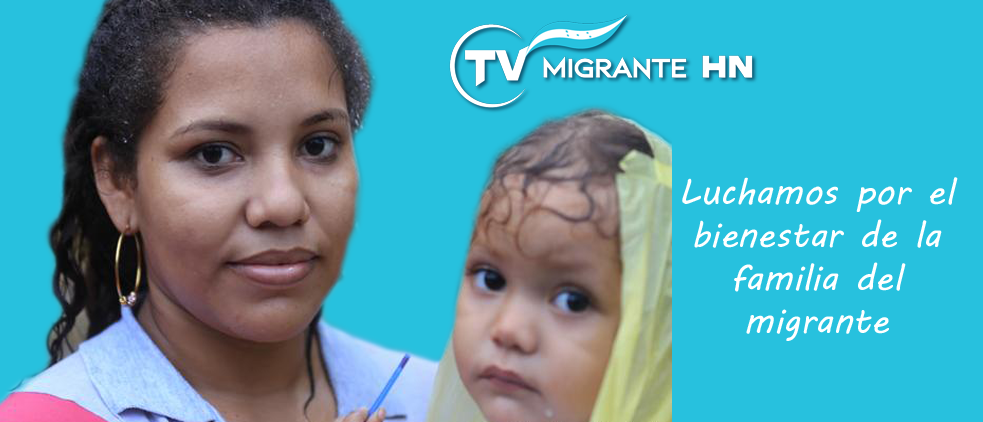
<style>
.page{position:relative;width:983px;height:422px;background:#27c1de}
.page>*{position:absolute;margin:0}
.t1{font:36px "MVBoli";color:#ffffff}
.t2{font:14px/798.6px "MSReferenceSansSerif";color:#ffffff}
</style>
<div class="page">
<p class="t1" style="left:682px;top:177px;width:276px;height:164px;text-align:center">Luchamos por el bienestar de la familia del <br>migrante l<span class="t2">el migrante</span></p>
</div>
